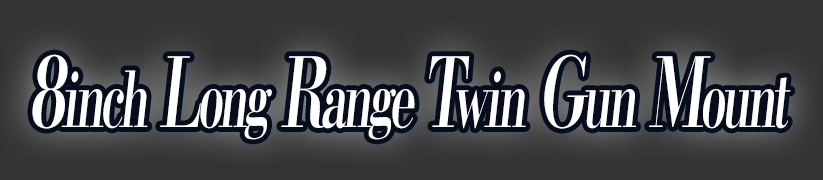
<style>
.page{position:relative;width:823px;height:180px;background:#333333}
.page>*{position:absolute;margin:0}
.t1{font:76.8px "KochoStd-Heavy";letter-spacing:-0.08em;color:#ffffff;font-style:italic;scale:0.62 1}
.t2{font:96px "KochoStd-Heavy";letter-spacing:-0.08em;color:#ffffff;font-style:italic;scale:0.62 1}
</style>
<div class="page">
<p class="t1" style="left:32px;top:54px;width:759px;height:86px"><span class="t2">8</span>inch<span class="t2"> L</span>ong<span class="t2"> R</span>ange <span class="t2">T</span>win<span class="t2"> G</span>un<span class="t2"> M</span>ount</p>
</div>
